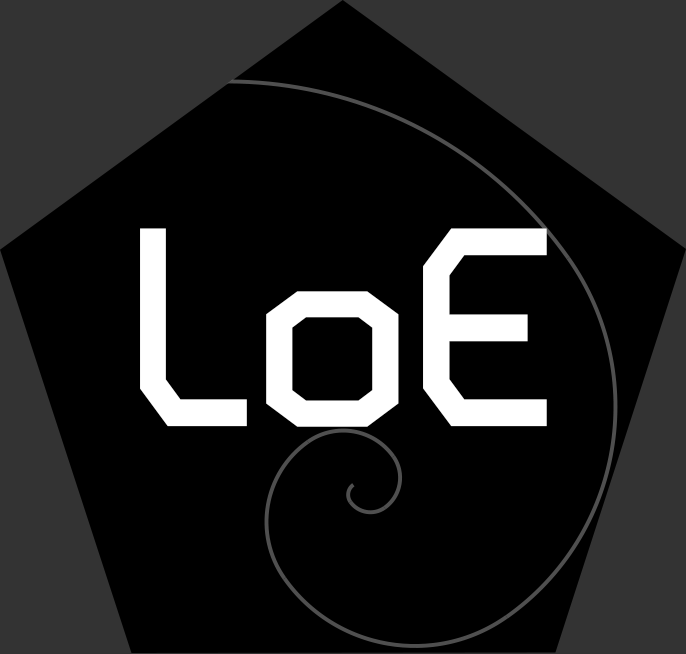
<style>
.page{position:relative;width:686px;height:654px;background:#000000}
.page>*{position:absolute;margin:0}
.t1{font:281.5px "TurretRoad-Bold";color:#ffffff}
</style>
<div class="page">
<p class="t1" style="left:140px;top:228px;width:407px;height:199px">LoE</p>
</div>
